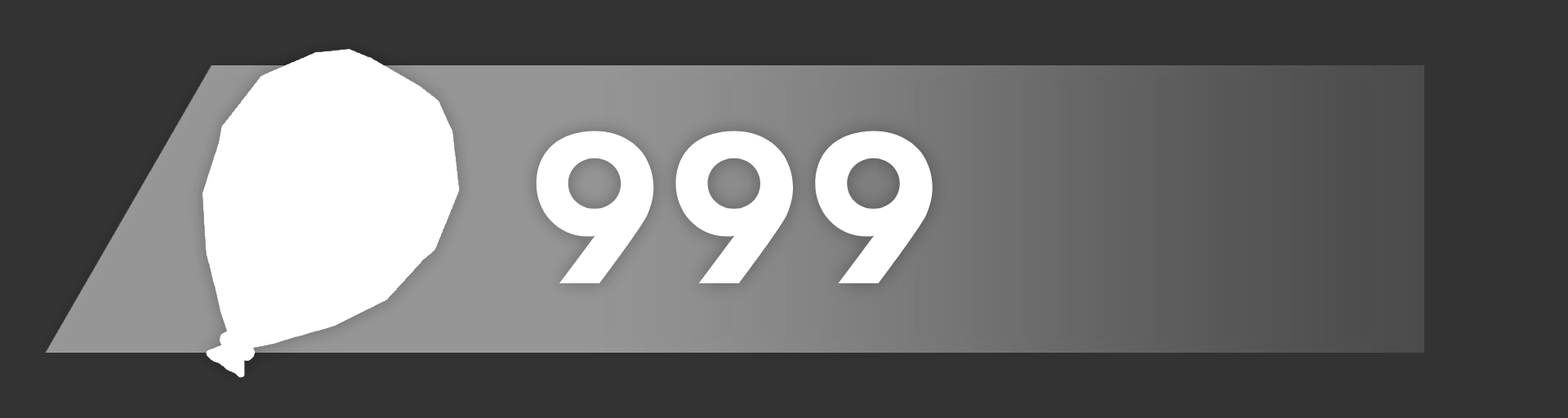
<style>
.page{position:relative;width:1568px;height:418px;background:#333333}
.page>*{position:absolute;margin:0}
.t1{font:204.2px "Renogare-Regular";color:#ffffff}
</style>
<div class="page">
<p class="t1" style="left:536px;top:131px;width:397px;height:152px">999</p>
</div>
